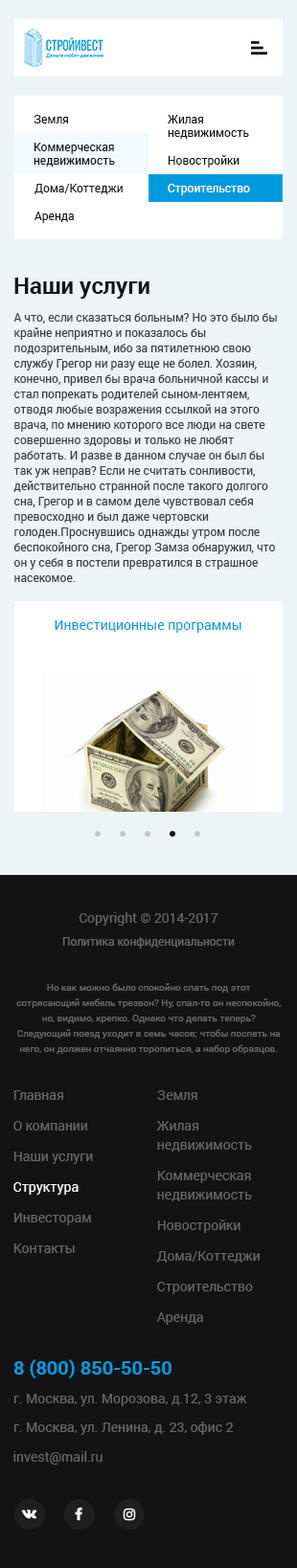
<style>
.page{position:relative;width:297px;height:1568px;background:#131313}
.page>*{position:absolute;margin:0}
.t1{font:11.5px "Roboto-Regular";color:#131313}
.t2{font:11.5px/13.4px "Roboto-Regular";color:#131313}
.t3{font:11.5px "Roboto-Regular";color:#ffffff}
.t4{font:23px "Roboto-Bold";color:#131313}
.t5{font:11.5px/15.3px "Roboto-Regular";color:#3d3d3d}
.t6{font:13.4px "Roboto-Regular";color:#009adf}
.t7{font:13.4px "Roboto-Regular";color:#666666}
.t8{font:11.5px "Roboto-Regular";color:#666666}
.t9{font:9.6px/15.3px "Roboto-Regular";color:#666666}
.t10{font:13.4px/30.6px "Roboto-Regular";color:#666666}
.t11{font:13.4px/30.6px "Roboto-Regular";color:#ffffff}
.t12{font:13.4px/19.1px "Roboto-Regular";color:#666666}
.t13{font:19.1px "Roboto-Bold";color:#009adf;text-transform:uppercase}
</style>
<div class="page">
<p class="t1" style="left:34px;top:115px;width:34px;height:8px">Земля</p>
<p class="t2" style="left:168px;top:115px;width:81px;height:24px">Жилая<br>недвижимость</p>
<p class="t2" style="left:34px;top:143px;width:81px;height:24px">Коммерческая<br>недвижимость</p>
<p class="t1" style="left:168px;top:155px;width:71px;height:13px">Новостройки</p>
<p class="t1" style="left:34px;top:184px;width:89px;height:10px">Дома/Коттеджи</p>
<p class="t3" style="left:168px;top:184px;width:82px;height:11px">Строительство</p>
<p class="t1" style="left:34px;top:212px;width:40px;height:11px">Аренда</p>
<p class="t4" style="left:14px;top:278px;width:135px;height:21px">Наши услуги</p>
<p class="t5" style="left:13px;top:313px;width:264px;height:269px">А что, если сказаться больным? Но это было бы крайне неприятно и показалось бы подозрительным, ибо за пятилетнюю свою службу Грегор ни разу еще не болел. Хозяин, конечно, привел бы врача больничной кассы и стал попрекать родителей сыном-лентяем, отводя любые возражения ссылкой на этого врача, по мнению которого все люди на свете совершенно здоровы и только не любят работать. И разве в данном случае он был бы так уж неправ? Если не считать сонливости, действительно странной после такого долгого сна, Грегор и в самом деле чувствовал себя превосходно и был даже чертовски голоден.Проснувшись однажды утром после беспокойного сна, Грегор Замза обнаружил, что он у себя в постели превратился в страшное насекомое.</p>
<p class="t6" style="left:55px;top:620px;width:186px;height:13px">Инвестиционные программы</p>
<p class="t7" style="left:78px;top:912px;width:140px;height:14px">Copyright © 2014-2017</p>
<p class="t8" style="left:62px;top:937px;width:173px;height:12px">Политика конфиденциальности</p>
<p class="t9" style="left:16px;top:983px;width:264px;height:71px;text-align:center">Но как можно было спокойно спать под этот сотрясающий мебель трезвон? Ну, спал-то он неспокойно, но, видимо, крепко. Однако что делать теперь? Следующий поезд уходит в семь часов; чтобы поспеть на него, он должен отчаянно торопиться, а набор образцов.</p>
<p class="t10" style="left:13px;top:1090px;width:80px;height:163px">Главная<br>О компании<br>Наши услуги<br><span class="t11">Структура<br></span>Инвесторам<br>Контакты</p>
<p class="t10" style="left:156px;top:1090px;width:103px;height:235px">Земля<br>Жилая<br><span class="t12">недвижимость<br></span>Коммерческая<br><span class="t12">недвижимость<br></span>Новостройки<br>Дома/Коттеджи<br>Строительство<br>Аренда</p>
<p class="t13" style="left:13px;top:1359px;width:158px;height:19px">8 (800) 850-50-50</p>
<p class="t7" style="left:13px;top:1394px;width:234px;height:12px">г. Москва, ул. Морозова, д.12, 3 этаж</p>
<p class="t7" style="left:13px;top:1422px;width:221px;height:13px">г. Москва, ул. Ленина, д. 23, офис 2</p>
<p class="t7" style="left:13px;top:1451px;width:89px;height:14px">invest@mail.ru</p>
</div>
